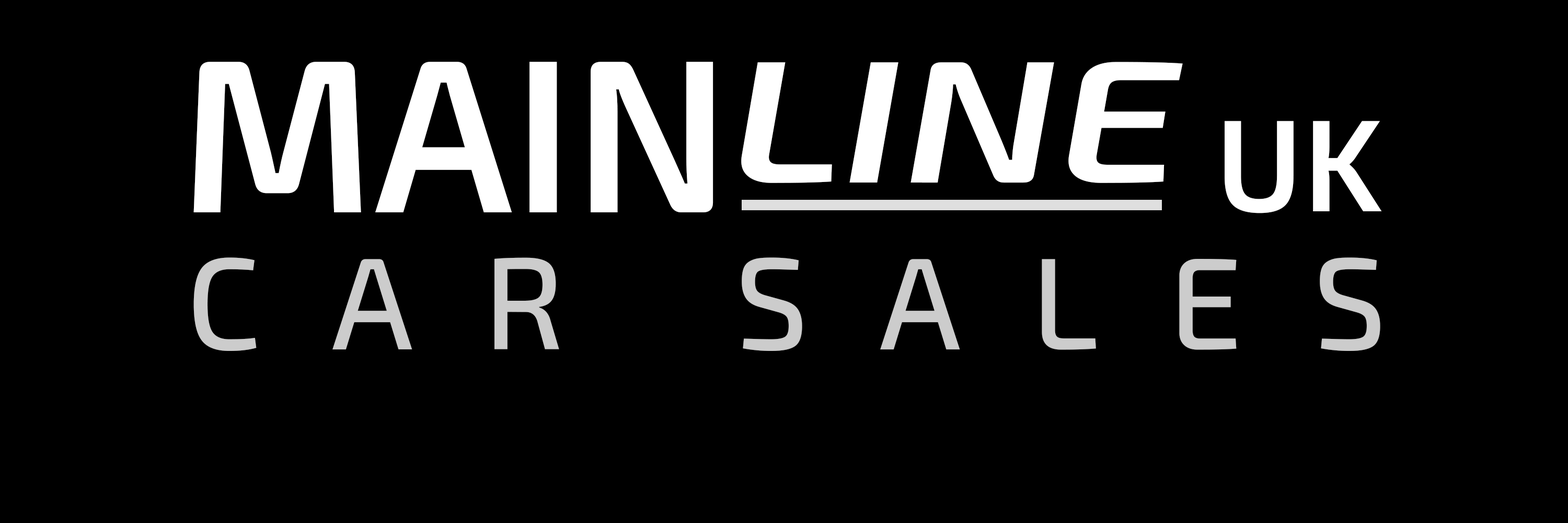
<style>
.page{position:relative;width:1568px;height:523px;background:#000000}
.page>*{position:absolute;margin:0}
.t1{font:217.8px "Exo2-SemiBold";color:#ffffff}
.t2{font:174.2px "Exo2-SemiBoldItalic";color:#ffffff;scale:1.25 1}
.t3{font:130.7px "Exo2-SemiBold";color:#ffffff}
.t4{font:130.7px "Exo2-Medium";letter-spacing:0.54em;color:#cccccc}
</style>
<div class="page">
<p class="t1" style="left:193px;top:62px;width:520px;height:150px">MAIN</p>
<p class="t2" style="left:741px;top:62px;width:442px;height:121px">LINE</p>
<p class="t3" style="left:1225px;top:121px;width:157px;height:92px">UK</p>
<p class="t4" style="left:193px;top:257px;width:1187px;height:94px">CAR SALES</p>
</div>
